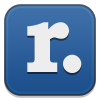
<style>
.page{position:relative;width:100px;height:100px}
.page>*{position:absolute;margin:0}
.t1{font:100px "BookmanOldStyle-Bold";color:#ffffff}
</style>
<div class="page">
<p class="t1" style="left:27px;top:22px;width:55px;height:51px">r.</p>
</div>
